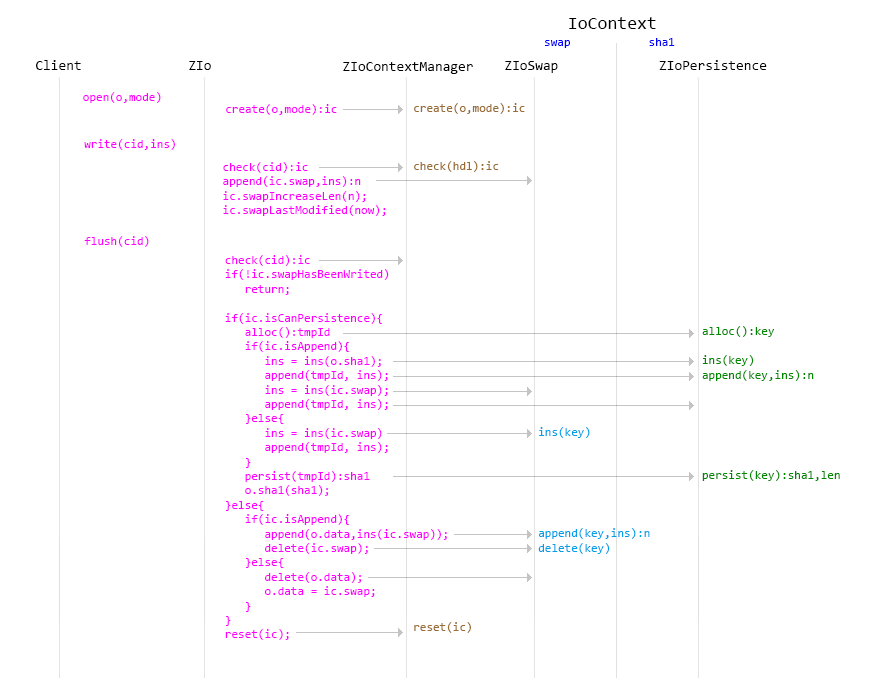
<style>
.page{position:relative;width:872px;height:678px;background:#ffffff}
.page>*{position:absolute;margin:0}
.t1{font:18px "Consolas";color:#000000}
.t2{font:12px "Consolas";color:#0000ff}
.t3{font:14px "Consolas";color:#000000}
.t4{font:12px "Consolas";color:#ff00ff}
.t5{font:12px "Consolas";color:#996c33}
.t6{font:12px "Consolas";color:#008800}
.t7{font:12px "Consolas";color:#00a0e9}
</style>
<div class="page">
<p class="t1" style="left:569px;top:17px;width:87px;height:12px">IoContext</p>
<p class="t2" style="left:545px;top:40px;width:25px;height:8px">swap</p>
<p class="t2" style="left:649px;top:38px;width:26px;height:8px">sha1</p>
<p class="t3" style="left:36px;top:60px;width:45px;height:10px">Client</p>
<p class="t3" style="left:189px;top:61px;width:22px;height:9px">ZIo</p>
<p class="t3" style="left:343px;top:62px;width:130px;height:12px">ZIoContextManager</p>
<p class="t3" style="left:505px;top:61px;width:53px;height:12px">ZIoSwap</p>
<p class="t3" style="left:659px;top:60px;width:108px;height:10px">ZIoPersistence</p>
<p class="t4" style="left:83px;top:92px;width:78px;height:11px">open(o,mode)</p>
<p class="t4" style="left:226px;top:104px;width:111px;height:11px">create(o,mode):ic</p>
<p class="t5" style="left:414px;top:103px;width:111px;height:530px">create(o,mode):ic<br><br><br><br>check(hdl):ic<br><br><br><br><br><br><br><br><br><br><br><br><br><br><br><br><br><br><br><br><br><br><br><br><br><br><br><br><br><br><br><br>reset(ic)</p>
<p class="t4" style="left:84px;top:139px;width:91px;height:11px">write(cid,ins)</p>
<p class="t4" style="left:223px;top:162px;width:163px;height:54px">check(cid):ic<br>append(ic.swap,ins):n<br>ic.swapIncreaseLen(n);<br>ic.swapLastModified(now);</p>
<p class="t4" style="left:84px;top:236px;width:65px;height:11px">flush(cid)</p>
<p class="t4" style="left:225px;top:255px;width:222px;height:385px">check(cid):ic<br>if(!ic.swapHasBeenWrited)<br>   return;<br><br>if(ic.isCanPersistence){<br>   alloc():tmpId<br>   if(ic.isAppend){<br>      ins = ins(o.sha1);<br>      append(tmpId, ins);<br>      ins = ins(ic.swap);<br>      append(tmpId, ins);<br>   }else{<br>      ins = ins(ic.swap)<br>      append(tmpId, ins);<br>   }<br>   persist(tmpId):sha1<br>   o.sha1(sha1);<br>}else{<br>   if(ic.isAppend){<br>      append(o.data,ins(ic.swap));<br>      delete(ic.swap);<br>   }else{<br>      delete(o.data);<br>      o.data = ic.swap;<br>   }<br>}<br>reset(ic);</p>
<p class="t6" style="left:702px;top:326px;width:138px;height:155px">alloc():key<br><br>ins(key)<br>append(key,ins):n<br><br><br><br><br><br><br>persist(key):sha1,len</p>
<p class="t7" style="left:538px;top:427px;width:112px;height:127px">ins(key)<br><br><br><br><br><br><br>append(key,ins):n<br>delete(key)</p>
</div>
